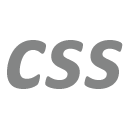
<style>
.page{position:relative;width:128px;height:128px;background:#ffffff}
.page>*{position:absolute;margin:0}
.t1{font:100px "Calibri-BoldItalic";color:#848585}
</style>
<div class="page">
<p class="t1" style="left:7px;top:40px;width:116px;height:49px">css</p>
</div>
